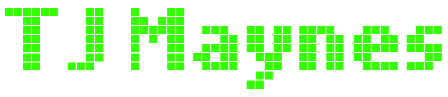
<style>
.page{position:relative;width:448px;height:97px;background:#ffffff}
.page>*{position:absolute;margin:0}
.t1{font:89px "LLPixel";color:#33ff00}
</style>
<div class="page">
<p class="t1" style="left:4px;top:8px;width:438px;height:81px">TJ Maynes</p>
</div>
